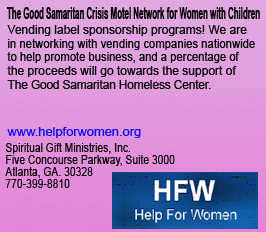
<style>
.page{position:relative;width:266px;height:232px}
.page>*{position:absolute;margin:0}
.t1{font:16.9px "Arial-BoldMT";color:#000000;scale:0.47 1}
.t2{font:12px "ArialMT";color:#000000}
.t3{font:12px "ArialMT";color:#000000;scale:0.94 1}
.t4{font:12px "ArialMT";color:#000000;scale:0.93 1}
.t5{font:12px "ArialMT";color:#000000;scale:0.97 1}
.t6{font:12px "ArialMT";color:#0b0bf9;scale:1.07 1}
.t7{font:12px "ArialMT";color:#000000;scale:0.86 1}
</style>
<div class="page">
<p class="t1" style="left:7px;top:7px;width:253px;height:12px">The Good Samaritan Crisis Motel Network for Women with Children</p>
<p class="t2" style="left:7px;top:25px;width:240px;height:11px">Vending label sponsorship programs! We are</p>
<p class="t3" style="left:8px;top:39px;width:247px;height:11px">in networking with vending companies nationwide</p>
<p class="t4" style="left:7px;top:52px;width:232px;height:11px">to help promote business, and a percentage of</p>
<p class="t2" style="left:7px;top:66px;width:230px;height:11px">the proceeds will go towards the support of</p>
<p class="t5" style="left:7px;top:80px;width:204px;height:9px">The Good Samaritan Homeless Center.</p>
<p class="t6" style="left:7px;top:127px;width:134px;height:11px">www.helpforwomen.org</p>
<p class="t7" style="left:5px;top:143px;width:125px;height:11px">Spiritual Gift Ministries, Inc.</p>
<p class="t7" style="left:6px;top:155px;width:169px;height:11px">Five Concourse Parkway, Suite 3000</p>
<p class="t7" style="left:5px;top:167px;width:88px;height:11px">Atlanta, GA. 30328</p>
<p class="t7" style="left:5px;top:179px;width:65px;height:9px">770-399-8810</p>
</div>
